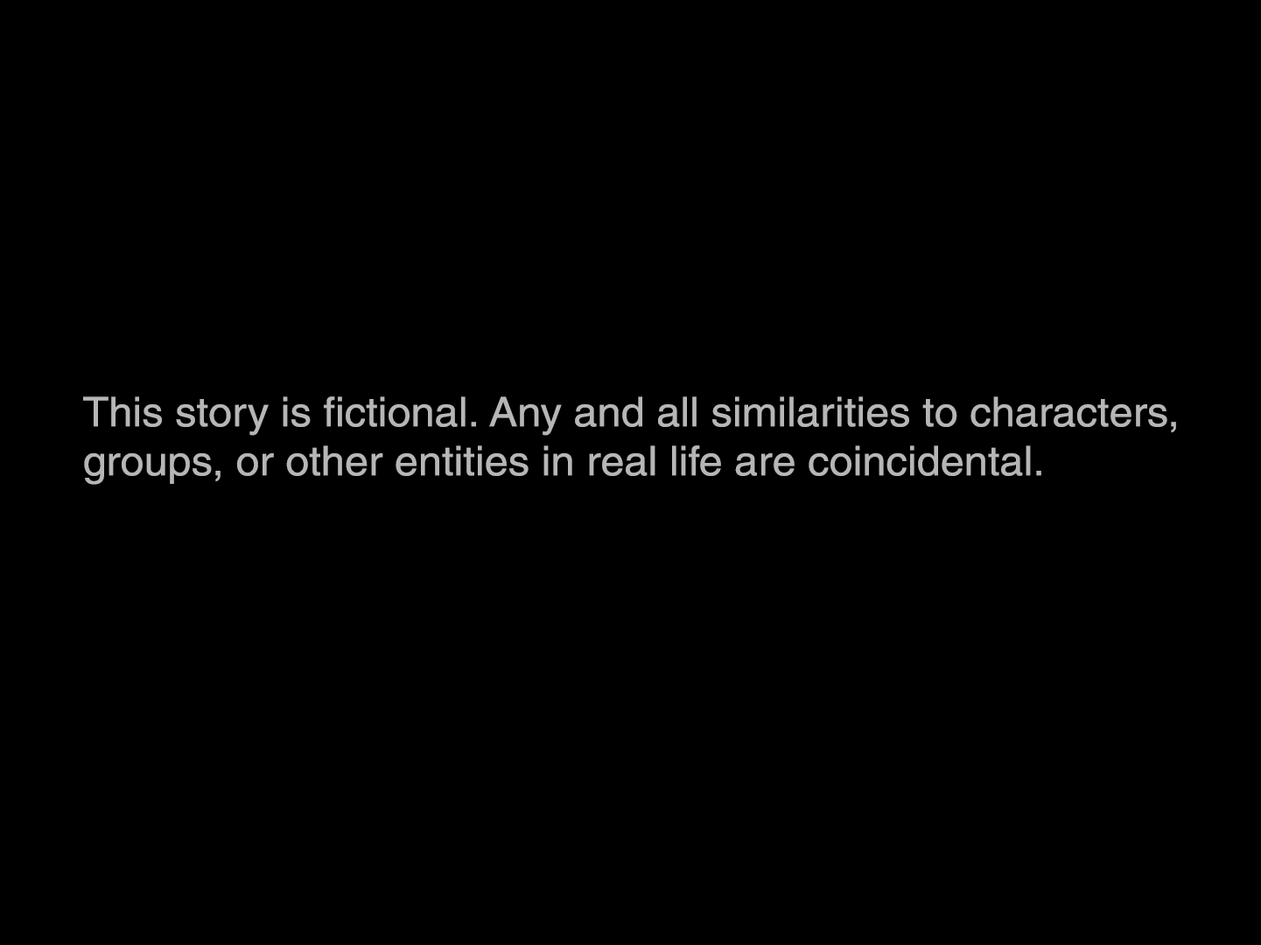
<style>
.page{position:relative;width:1261px;height:945px;background:#000000}
.page>*{position:absolute;margin:0}
.t1{font:40.8px "Helvetica";color:#b6b6b6;scale:1.04 1}
</style>
<div class="page">
<p class="t1" style="left:83px;top:397px;width:1093px;height:88px">This story is fictional. Any and all similarities to characters,<br>groups, or other entities in real life are coincidental.</p>
</div>
